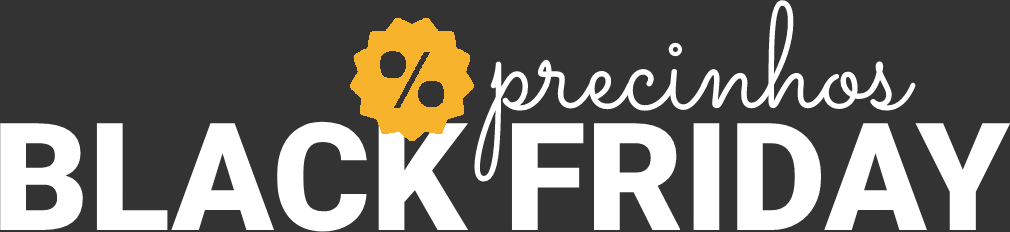
<style>
.page{position:relative;width:1010px;height:232px;background:#333333}
.page>*{position:absolute;margin:0}
.t1{font:150px "Sacramento-Regular";color:#ffffff}
.t2{font:150px "Roboto-Black";color:#ffffff;text-transform:uppercase}
</style>
<div class="page">
<p class="t1" style="left:474px;top:0px;width:442px;height:182px">precinhos</p>
<p class="t2" style="left:0px;top:121px;width:1011px;height:111px">Black Friday</p>
</div>
